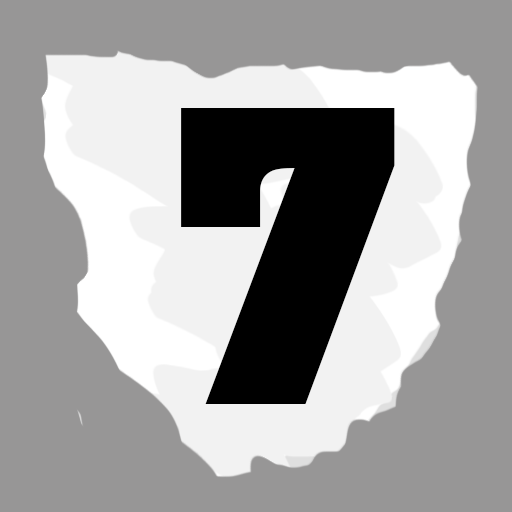
<style>
.page{position:relative;width:512px;height:512px;background:#979696}
.page>*{position:absolute;margin:0}
.t1{font:453.9px "VNI-Auchon-Bold";letter-spacing:-0.015em;color:#000000}
</style>
<div class="page">
<p class="t1" style="left:181px;top:108px;width:214px;height:296px">7</p>
</div>
